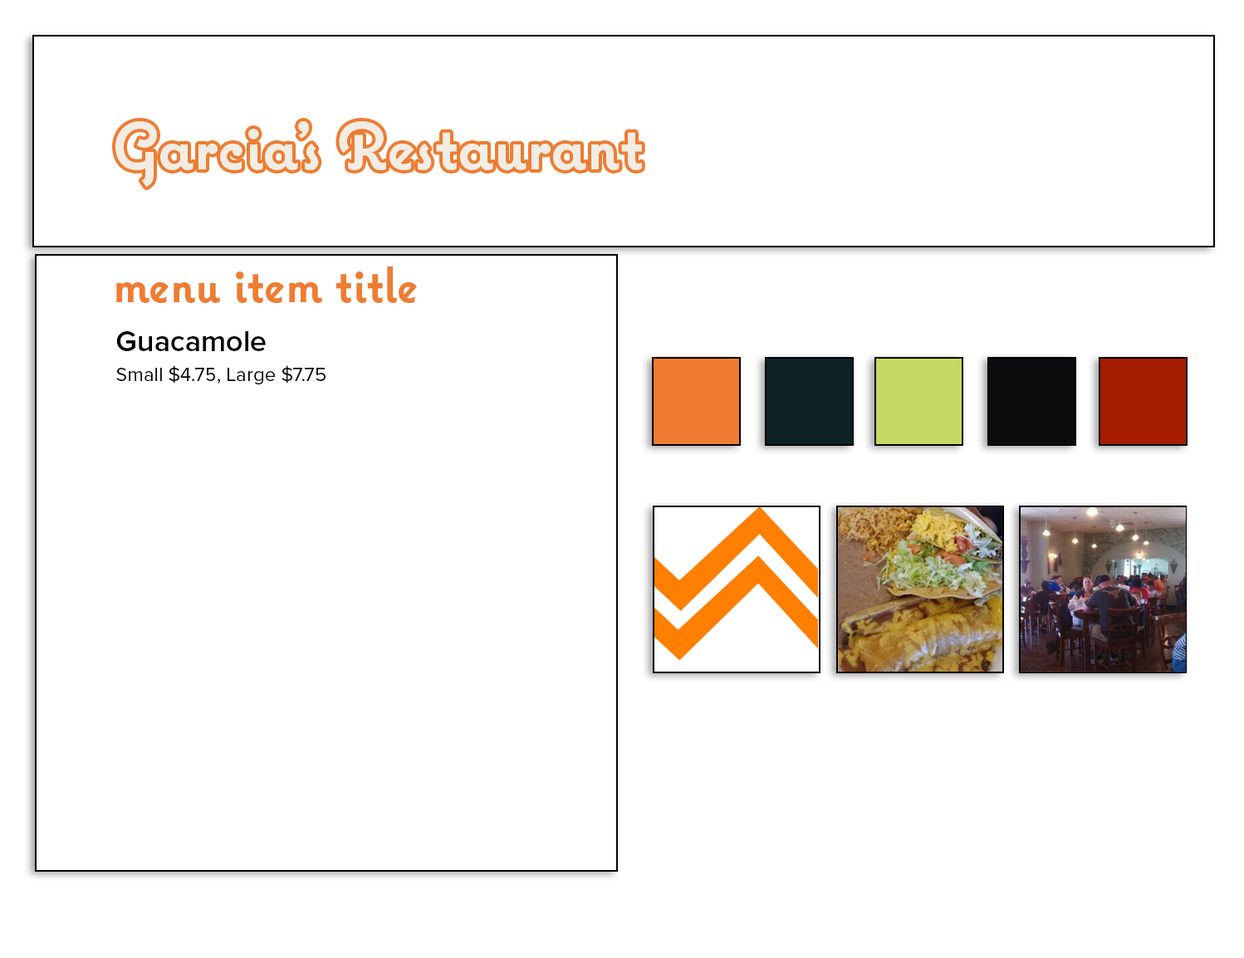
<style>
.page{position:relative;width:1244px;height:958px;background:#ffffff}
.page>*{position:absolute;margin:0}
.t1{font:66.4px "Coquette-Bold";color:#f2ede4}
.t2{font:66.4px "Coquette-Bold";letter-spacing:-0.12em;color:#f2ede4}
.t3{font:49.8px "Coquette-Bold";color:#ef7c31}
.t4{font:19.9px/29.9px "ProximaNova-Regular";color:#000000}
.t5{font:29.9px "ProximaNova-Semibold";color:#000000}
</style>
<div class="page">
<p class="t1" style="left:115px;top:121px;width:527px;height:67px">Garcia<span class="t2">’</span>s Restaurant</p>
<p class="t3" style="left:116px;top:267px;width:301px;height:36px">menu item title</p>
<p class="t4" style="left:116px;top:331px;width:210px;height:54px"><span class="t5">Guacamole<br></span>Small $4.75, Large $7.75</p>
</div>
